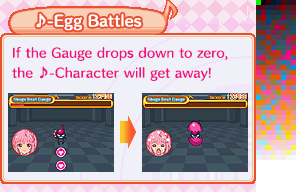
<style>
.page{position:relative;width:296px;height:192px;background:#f0f0f8}
.page>*{position:absolute;margin:0}
.t1{font:14px "HummingStd-B";letter-spacing:0.02em;color:#ffffff}
.t2{font:12px/20px "HummingStd-D";letter-spacing:0.02em;color:#f01080}
</style>
<div class="page">
<p class="t1" style="left:36px;top:13px;width:106px;height:18px">♪-Egg Battles</p>
<p class="t2" style="left:12px;top:47px;width:216px;height:34px">If the Gauge drops down to zero,<br>the ♪-Character will get away!</p>
</div>
